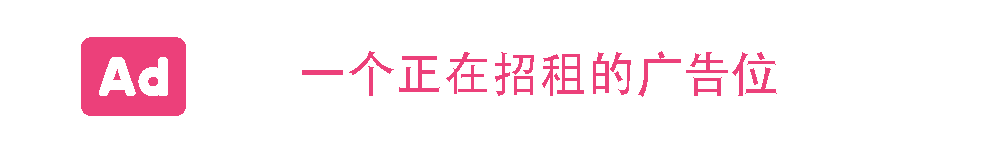
<style>
.page{position:relative;width:1000px;height:150px;background:#ffffff}
.page>*{position:absolute;margin:0}
.t1{font:48px "AdobeHeitiStd-Regular";color:#ec407a}
</style>
<div class="page">
<p class="t1" style="left:302px;top:51px;width:475px;height:46px">一个正在招租的广告位</p>
</div>
